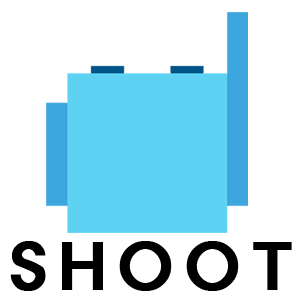
<style>
.page{position:relative;width:300px;height:300px;background:#ffffff}
.page>*{position:absolute;margin:0}
.t1{font:60px "ExpoM-HM";letter-spacing:0.2em;color:#000000;font-weight:bold}
</style>
<div class="page">
<p class="t1" style="left:10px;top:241px;width:282px;height:50px">SHOOT</p>
</div>
